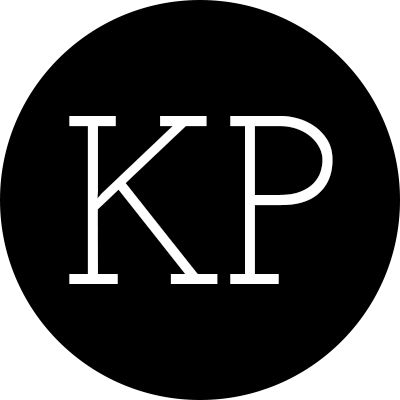
<style>
.page{position:relative;width:400px;height:400px;background:#000000}
.page>*{position:absolute;margin:0}
.t1{font:240.4px "JosefinSlab";color:#ffffff}
</style>
<div class="page">
<p class="t1" style="left:69px;top:116px;width:264px;height:168px">KP</p>
</div>
